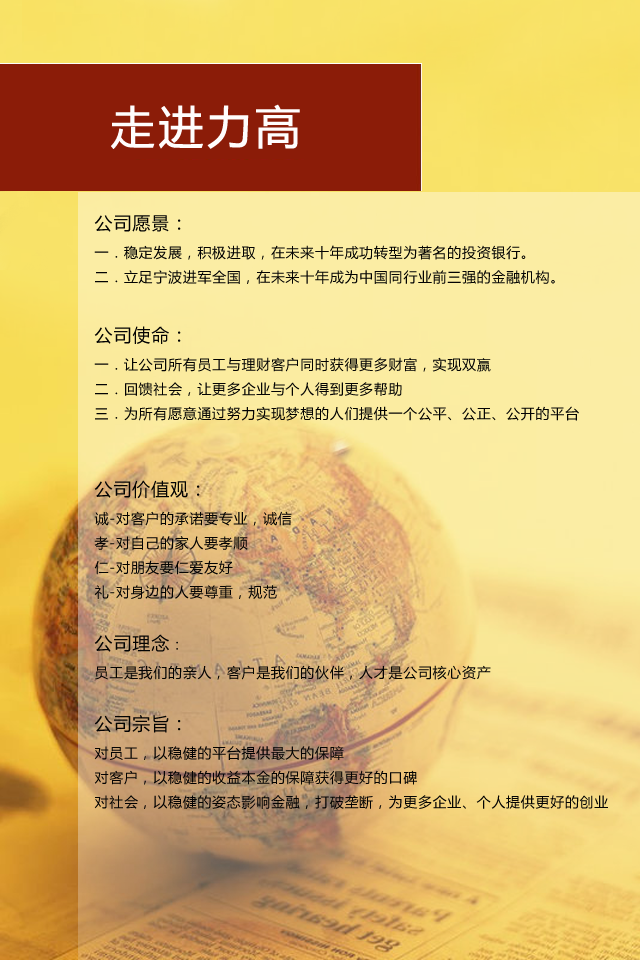
<style>
.page{position:relative;width:640px;height:960px}
.page>*{position:absolute;margin:0}
.t1{font:45px "MicrosoftYaHei";letter-spacing:0.05em;color:#fffdfd;font-weight:bold}
.t2{font:14px "MicrosoftYaHei";letter-spacing:0.05em;color:#030303}
.t3{font:18px "MicrosoftYaHei";letter-spacing:0.05em;color:#030303}
</style>
<div class="page">
<p class="t1" style="left:111px;top:104px;width:189px;height:45px">走进力高</p>
<p class="t2" style="left:94px;top:215px;width:514px;height:594px"><span class="t3">公司愿景：<br></span>一．稳定发展，积极进取，在未来十年成功转型为著名的投资银行。<br>二．立足宁波进军全国，在未来十年成为中国同行业前三强的金融机构。<br><span class="t3"><br>公司使命：<br></span>一．让公司所有员工与理财客户同时获得更多财富，实现双赢<br>二．回馈社会，让更多企业与个人得到更多帮助<br>三．为所有愿意通过努力实现梦想的人们提供一个公平、公正、公开的平台<br><br><br><span class="t3">公司价值观：<br></span>诚-对客户的承诺要专业，诚信<br>孝-对自己的家人要孝顺<br>仁-对朋友要仁爱友好<br>礼-对身边的人要尊重，规范<br><br><span class="t3">公司理念</span>：<br>员工是我们的亲人，客户是我们的伙伴，人才是公司核心资产<br><br><span class="t3">公司宗旨：<br></span>对员工，以稳健的平台提供最大的保障<br>对客户，以稳健的收益本金的保障获得更好的口碑<br>对社会，以稳健的姿态影响金融，打破垄断，为更多企业、个人提供更好的创业</p>
</div>
